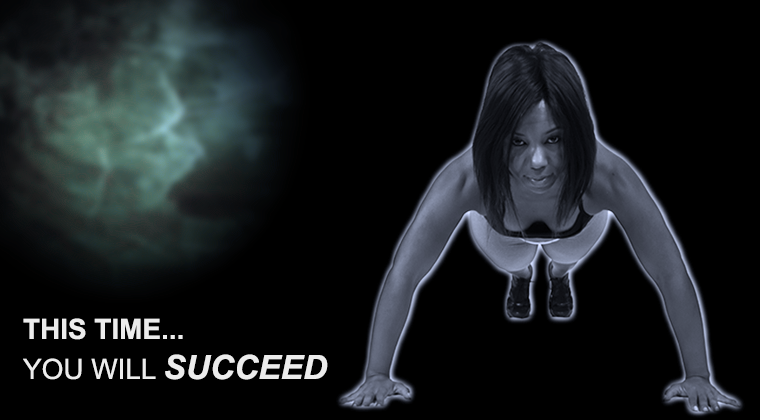
<style>
.page{position:relative;width:760px;height:420px;background:#000000}
.page>*{position:absolute;margin:0}
.t1{font:27.8px "Arial-BoldMT";color:#ececec;text-transform:uppercase}
.t2{font:27.8px "ArialMT";color:#ececec;text-transform:uppercase}
.t3{font:33.4px "Arial-BoldItalicMT";color:#ececec;text-transform:uppercase}
</style>
<div class="page">
<p class="t1" style="left:23px;top:318px;width:305px;height:62px">THIS TIME...<br><span class="t2">YOU WILL </span><span class="t3">SUCCEED</span></p>
</div>
